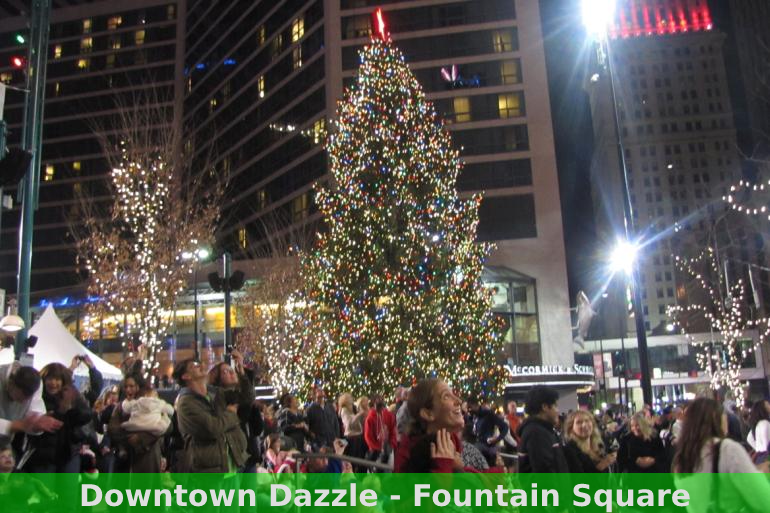
<style>
.page{position:relative;width:770px;height:513px}
.page>*{position:absolute;margin:0}
.t1{font:30px "DejaVuSans-Bold";color:#dedede}
</style>
<div class="page">
<p class="t1" style="left:81px;top:483px;width:609px;height:30px">Downtown Dazzle - Fountain Square</p>
</div>
